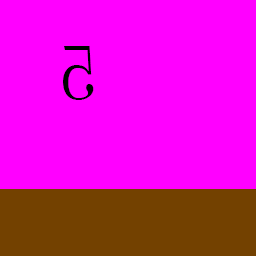
<style>
.page{position:relative;width:256px;height:256px;background:#ff00ff}
.page>*{position:absolute;margin:0}
.t1{font:80px "SimSun";color:#000000}
</style>
<div class="page">
<p class="t1" style="left:63px;top:46px;width:31px;height:54px;rotate:180deg">5</p>
</div>
